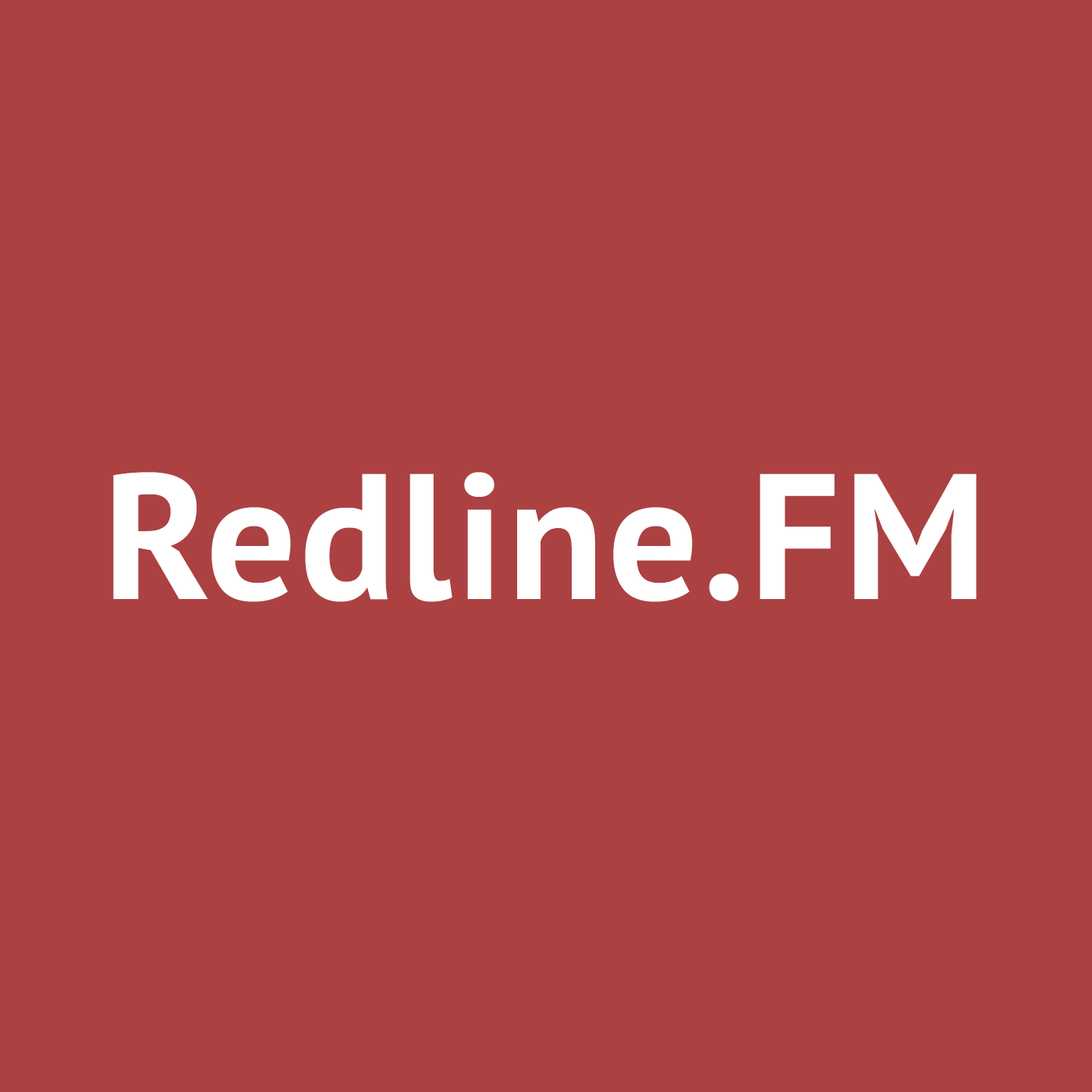
<style>
.page{position:relative;width:1092px;height:1092px;background:#ac4142}
.page>*{position:absolute;margin:0}
.t1{font:178.4px "PTSans-Bold";letter-spacing:0.02em;color:#ffffff}
</style>
<div class="page">
<p class="t1" style="left:113px;top:472px;width:864px;height:130px">Redline.FM</p>
</div>
